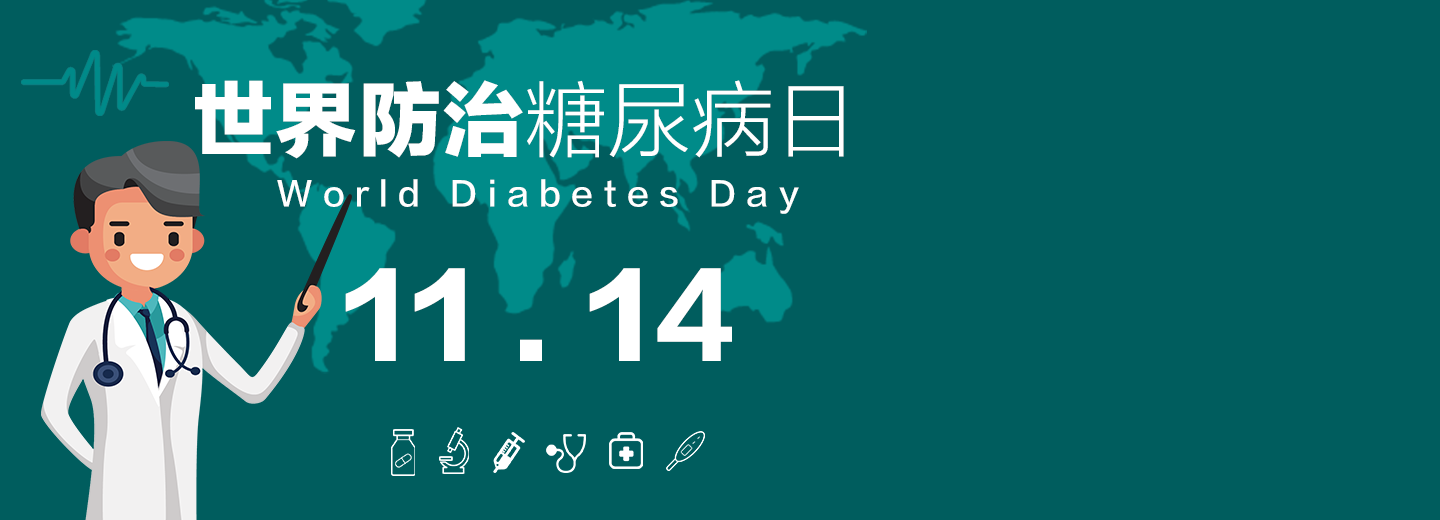
<style>
.page{position:relative;width:1440px;height:520px;background:#005d5e}
.page>*{position:absolute;margin:0}
.t1{font:82px "FZLTTHK--GBK1-0";letter-spacing:0.015em;color:#ffffff}
.t2{font:82px "FZLTXHK--GBK1-0";letter-spacing:0.015em;color:#ffffff}
.t3{font:33px "FZLTZHK--GBK1-0";letter-spacing:0.315em;color:#ffffff}
.t4{font:107px "FZLTTHK--GBK1-0";letter-spacing:0.055em;color:#ffffff}
</style>
<div class="page">
<p class="t1" style="left:195px;top:80px;width:649px;height:79px">世界防治<span class="t2">糖尿病日</span></p>
<p class="t3" style="left:277px;top:179px;width:522px;height:35px">World Diabetes Day</p>
<p class="t4" style="left:345px;top:268px;width:387px;height:93px">11 . 14</p>
</div>
